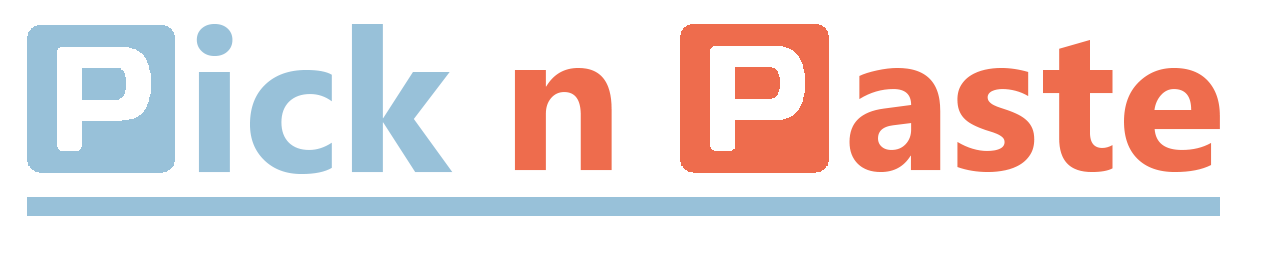
<style>
.page{position:relative;width:1280px;height:275px;background:#ffffff}
.page>*{position:absolute;margin:0}
.t1{font:200px "Ebrima-Bold";color:#98c1d9}
.t2{font:200px "Ebrima-Bold";color:#ee6c4d}
</style>
<div class="page">
<p class="t1" style="left:196px;top:24px;width:257px;height:150px">ick</p>
<p class="t2" style="left:514px;top:40px;width:706px;height:132px">n    aste</p>
</div>
